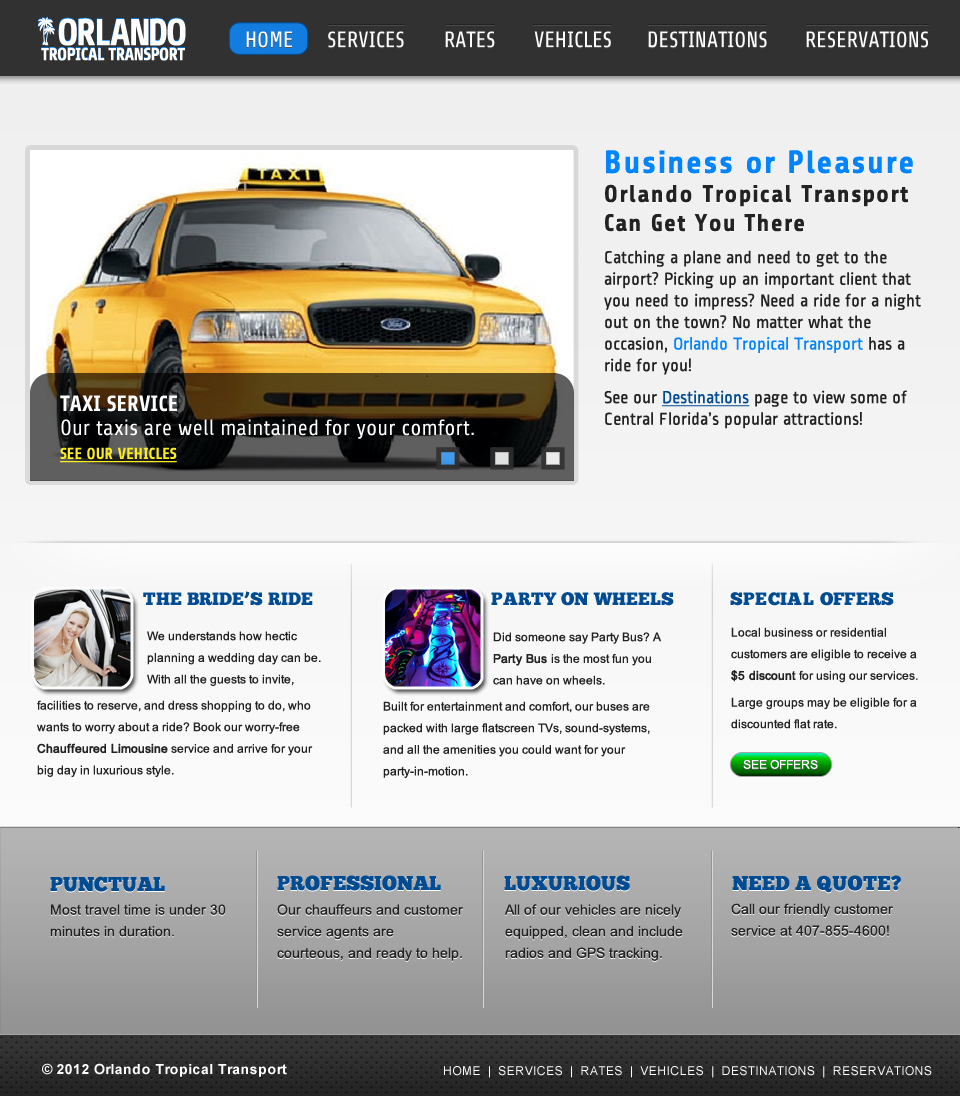
<style>
.page{position:relative;width:960px;height:1096px}
.page>*{position:absolute;margin:0}
.t1{font:22px "Share-Regular";color:#ffffff}
.t2{font:22px "Share-Regular"}
.t3{font:24px/28.8px "Share-Bold";letter-spacing:0.06em;color:#222222}
.t4{font:32px/38.4px "Share-Bold";letter-spacing:0.05em;color:#0084ff}
.t5{font:24px/28.8px "Share-Bold";letter-spacing:0.05em;color:#222222}
.t6{font:24px/28.8px "Share-Bold";letter-spacing:0.06em}
.t7{font:32px/38.4px "Share-Bold";letter-spacing:0.05em}
.t8{font:24px/28.8px "Share-Bold";letter-spacing:0.05em}
.t9{font:18px/21.6px "RopaSans-Regular";color:#222222}
.t10{font:18px/21.6px "RopaSans-Regular";color:#0084ff}
.t11{font:18px/21.6px "RopaSans-Regular";color:#004b91;text-decoration:underline}
.t12{font:22px/24px "Share-Regular";color:#ffffff}
.t13{font:22px/24px "Share-Bold";color:#ffffff}
.t14{font:16px/24px "Share-Bold";color:#fbed21;text-transform:uppercase;text-decoration:underline}
.t15{font:18px "ChunkFive-Roman";color:#004b91}
.t16{font:18px "ChunkFive-Roman";letter-spacing:0.02em;color:#004b91;text-transform:uppercase}
.t17{font:12px/21.6px "ArialMT";color:#222222}
.t18{font:12px/21.6px "ArialMT";color:#222222;font-weight:bold}
.t19{font:12px "ArialMT"}
.t20{font:12px "ArialMT";color:#ffffff}
.t21{font:20px "ChunkFive-Roman";color:#004b91}
.t22{font:20px "ChunkFive-Roman";letter-spacing:0.02em;color:#004b91;text-transform:uppercase}
.t23{font:14px/21.6px "ArialMT"}
.t24{font:14px/21.6px "ArialMT";color:#222222}
.t25{font:14px "Arial-BoldMT";letter-spacing:0.02em;color:#ffffff}
.t26{font:14px "Arial-BoldMT";letter-spacing:0.02em;color:#ffffff;text-transform:uppercase}
.t27{font:12px "ArialMT";letter-spacing:0.04em;color:#ffffff;text-transform:uppercase}
</style>
<div class="page">
<p class="t1" style="left:246px;top:32px;width:46px;height:17px">HOME</p>
<p class="t1" style="left:246px;top:31px;width:46px;height:17px">HOME</p>
<p class="t2" style="left:328px;top:32px;width:76px;height:17px">SERVICES</p>
<p class="t1" style="left:328px;top:31px;width:76px;height:17px">SERVICES</p>
<p class="t2" style="left:445px;top:32px;width:50px;height:17px">RATES</p>
<p class="t1" style="left:445px;top:31px;width:50px;height:17px">RATES</p>
<p class="t2" style="left:534px;top:32px;width:77px;height:17px">VEHICLES</p>
<p class="t1" style="left:534px;top:31px;width:77px;height:17px">VEHICLES</p>
<p class="t2" style="left:648px;top:32px;width:119px;height:17px">DESTINATIONS</p>
<p class="t1" style="left:648px;top:31px;width:119px;height:17px">DESTINATIONS</p>
<p class="t2" style="left:806px;top:32px;width:122px;height:17px">RESERVATIONS</p>
<p class="t1" style="left:806px;top:31px;width:122px;height:17px">RESERVATIONS</p>
<p class="t3" style="left:605px;top:150px;width:308px;height:82px"><span class="t4">Business or Pleasure<br></span>Orlando Tropical Transport <br><span class="t5">Can Get You There</span></p>
<p class="t6" style="left:605px;top:151px;width:308px;height:82px"><span class="t7">Business or Pleasure<br></span>Orlando Tropical Transport <br><span class="t8">Can Get You There</span></p>
<p class="t9" style="left:604px;top:250px;width:317px;height:125px">Catching a plane and need to get to the airport? Picking up an important client that you need to impress? Need a ride for a night out on the town? No matter what the occasion, <span class="t10">Orlando Tropical Transport </span>has a ride for you!</p>
<p class="t9" style="left:604px;top:390px;width:303px;height:39px">See our <span class="t11">Destinations</span> page to view some of  Central Florida’s popular attractions!</p>
<p class="t12" style="left:60px;top:395px;width:414px;height:68px;text-align:justify"><span class="t13">TAXI SERVICE<br></span>Our taxis are well maintained for your comfort.<br><span class="t14">See our vehicles</span></p>
<p class="t15" style="left:143px;top:592px;width:170px;height:15px">THE BRIDE’S RIDE</p>
<p class="t15" style="left:143px;top:591px;width:170px;height:15px">THE BRIDE’S RIDE</p>
<p class="t15" style="left:491px;top:593px;width:183px;height:14px">PARTY ON WHEELS</p>
<p class="t15" style="left:491px;top:592px;width:183px;height:14px">PARTY ON WHEELS</p>
<p class="t16" style="left:730px;top:593px;width:164px;height:14px">Special Offers</p>
<p class="t16" style="left:730px;top:592px;width:164px;height:14px">Special Offers</p>
<p class="t17" style="left:731px;top:627px;width:187px;height:56px">Local business or residential customers are eligible to receive a <span class="t18">$5 discount</span> for using our services.</p>
<p class="t17" style="left:147px;top:631px;width:174px;height:55px">We understands how hectic <br>planning a wedding day can be. <br>With all the guests to invite,</p>
<p class="t17" style="left:493px;top:632px;width:169px;height:53px">Did someone say Party Bus? A <span class="t18">Party Bus </span>is the most fun you can have on wheels.</p>
<p class="t17" style="left:37px;top:700px;width:276px;height:77px">facilities to reserve, and dress shopping to do, who wants to worry about a ride? Book our worry-free <span class="t18">Chauffeured Limousine</span> service and arrive for your <br>big day in luxurious style.</p>
<p class="t17" style="left:383px;top:701px;width:267px;height:77px">Built for entertainment and comfort, our buses are packed with large flatscreen TVs, sound-systems, and all the amenities you could want for your party-in-motion.</p>
<p class="t17" style="left:731px;top:697px;width:186px;height:32px">Large groups may be eligible for a discounted flat rate.</p>
<p class="t19" style="left:743px;top:760px;width:75px;height:10px">SEE OFFERS</p>
<p class="t20" style="left:743px;top:759px;width:75px;height:10px">SEE OFFERS</p>
<p class="t21" style="left:50px;top:877px;width:115px;height:16px">PUNCTUAL</p>
<p class="t21" style="left:50px;top:876px;width:115px;height:16px">PUNCTUAL</p>
<p class="t21" style="left:277px;top:876px;width:164px;height:16px">PROFESSIONAL</p>
<p class="t21" style="left:277px;top:875px;width:164px;height:16px">PROFESSIONAL</p>
<p class="t21" style="left:504px;top:876px;width:126px;height:16px">LUXURIOUS</p>
<p class="t21" style="left:504px;top:875px;width:126px;height:16px">LUXURIOUS</p>
<p class="t22" style="left:732px;top:876px;width:169px;height:18px">Need a quote?</p>
<p class="t22" style="left:732px;top:875px;width:169px;height:18px">Need a quote?</p>
<p class="t23" style="left:50px;top:905px;width:176px;height:33px">Most travel time is under 30 minutes in duration.</p>
<p class="t24" style="left:50px;top:904px;width:176px;height:33px">Most travel time is under 30 minutes in duration.</p>
<p class="t23" style="left:277px;top:905px;width:186px;height:57px">Our chauffeurs and customer service agents are courteous, and ready to help.</p>
<p class="t24" style="left:277px;top:904px;width:186px;height:57px">Our chauffeurs and customer service agents are courteous, and ready to help.</p>
<p class="t23" style="left:504px;top:905px;width:179px;height:57px">All of our vehicles are nicely equipped, clean and include radios and GPS tracking.</p>
<p class="t24" style="left:504px;top:904px;width:179px;height:57px">All of our vehicles are nicely equipped, clean and include radios and GPS tracking.</p>
<p class="t23" style="left:731px;top:904px;width:162px;height:33px">Call our friendly customer service at 407-855-4600!</p>
<p class="t24" style="left:731px;top:903px;width:162px;height:33px">Call our friendly customer service at 407-855-4600!</p>
<p class="t25" style="left:42px;top:1063px;width:245px;height:14px"><span class="t26">© 2012 O</span>rlando Tropical Transport</p>
<p class="t27" style="left:444px;top:1066px;width:488px;height:12px">HOME  |  SERVICES  |  RATES  |  VEHICLES  |  DESTINATIONS  |  RESERVATIONS</p>
</div>
